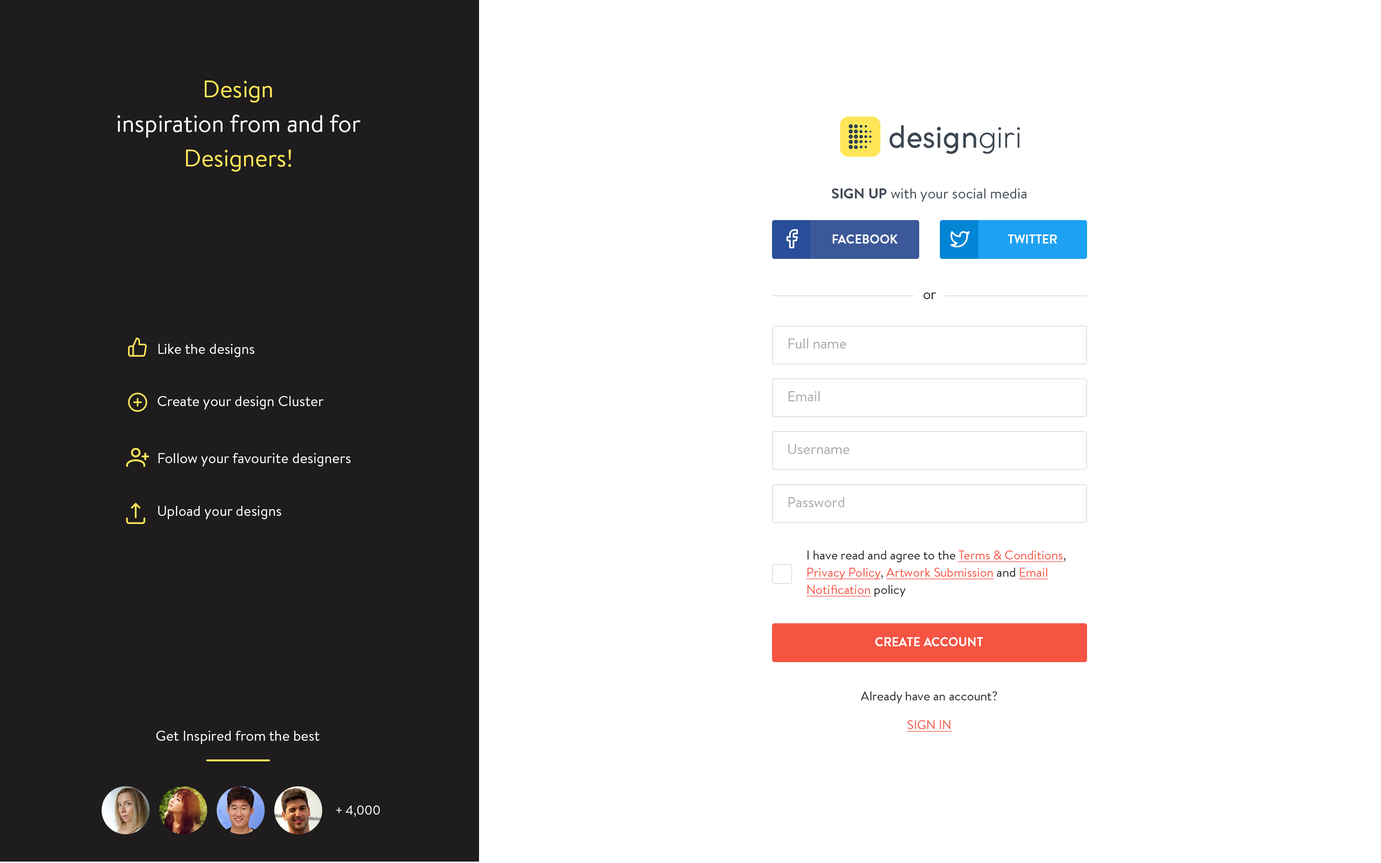
<style>
.page{position:relative;width:1381px;height:863px;background:#ffffff}
.page>*{position:absolute;margin:0}
.t1{font:24px/34.5px "BrandonText-Regular";color:#ffffff}
.t2{font:24px/34.5px "BrandonText-Regular";color:#ffe659}
.t3{font:14.4px "BrandonText-Regular";color:#3c4651}
.t4{font:14.4px "BrandonText-Bold";color:#3c4651}
.t5{font:12.5px "BrandonText-Bold";color:#ffffff;text-transform:uppercase}
.t6{font:14.4px "BrandonText-Regular";color:#1e1c1c}
.t7{font:14.4px "BrandonText-Regular";color:#a8a7a7}
.t8{font:14.4px "BrandonText-Regular";color:#ffffff}
.t9{font:12.5px/17.3px "BrandonText-Regular";color:#1e1c1c}
.t10{font:12.5px/17.3px "BrandonText-Regular";color:#f55443;text-decoration:underline}
.t11{font:12.5px "BrandonText-Regular";color:#1e1c1c}
.t12{font:12.5px "BrandonText-Regular";color:#f55443;text-transform:uppercase;text-decoration:underline}
.t13{font:12.5px "BrandonText-Regular";color:#ffffff}
</style>
<div class="page">
<p class="t1" style="left:118px;top:81px;width:243px;height:91px;text-align:center"><span class="t2">Design<br></span>inspiration from and for<br><span class="t2">Designers!</span></p>
<p class="t3" style="left:832px;top:188px;width:195px;height:14px"><span class="t4">SIGN UP</span> with your social media</p>
<p class="t5" style="left:833px;top:235px;width:65px;height:9px">Facebook</p>
<p class="t5" style="left:1008px;top:235px;width:49px;height:9px">Twitter</p>
<p class="t6" style="left:924px;top:293px;width:12px;height:6px">or</p>
<p class="t7" style="left:788px;top:339px;width:59px;height:10px">Full name</p>
<p class="t8" style="left:158px;top:344px;width:97px;height:13px">Like the designs</p>
<p class="t8" style="left:158px;top:396px;width:166px;height:14px">Create your design Cluster</p>
<p class="t7" style="left:788px;top:391px;width:32px;height:10px">Email</p>
<p class="t7" style="left:788px;top:444px;width:62px;height:10px">Username</p>
<p class="t8" style="left:158px;top:453px;width:193px;height:14px">Follow your favourite designers</p>
<p class="t7" style="left:788px;top:497px;width:57px;height:10px">Password</p>
<p class="t8" style="left:158px;top:506px;width:124px;height:13px">Upload your designs</p>
<p class="t9" style="left:806px;top:551px;width:260px;height:46px">I have read and agree to the <span class="t10">Terms &amp; Conditions</span>,<br><span class="t10">Privacy Policy</span>, <span class="t10">Artwork Submission</span> and <span class="t10">Email<br>Notification</span> policy</p>
<p class="t5" style="left:875px;top:637px;width:108px;height:10px">Create Account</p>
<p class="t11" style="left:861px;top:692px;width:137px;height:12px">Already have an account?</p>
<p class="t12" style="left:907px;top:720px;width:45px;height:12px">Sign in</p>
<p class="t8" style="left:156px;top:731px;width:164px;height:13px">Get Inspired from the best</p>
<p class="t13" style="left:336px;top:806px;width:44px;height:11px">+ 4,000</p>
</div>
